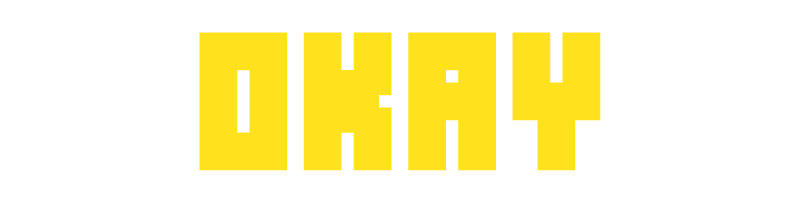
<style>
.page{position:relative;width:800px;height:200px;background:#ffffff}
.page>*{position:absolute;margin:0}
.t1{font:175px "04b19";letter-spacing:0.025em;color:#ffe21d}
</style>
<div class="page">
<p class="t1" style="left:199px;top:32px;width:402px;height:139px">OKAY</p>
</div>
